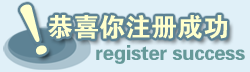
<style>
.page{position:relative;width:250px;height:72px;background:#e0f0f8}
.page>*{position:absolute;margin:0}
.t1{font:26px "FZDHTJW--GB1-0";color:#ffffcc}
</style>
<div class="page">
<p class="t1" style="left:31px;top:11px;width:216px;height:34px">恭喜你注册成功</p>
</div>
